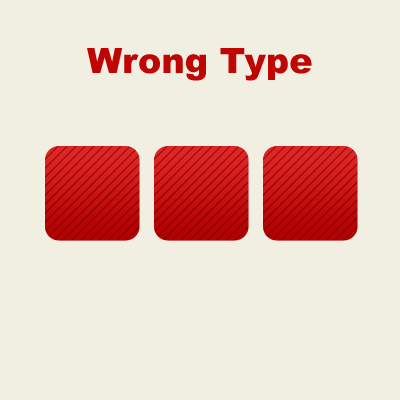
<style>
.page{position:relative;width:400px;height:400px;background:#f0efe1}
.page>*{position:absolute;margin:0}
.t1{font:35px "Arial-Black";color:#c00505}
</style>
<div class="page">
<p class="t1" style="left:87px;top:48px;width:225px;height:33px">Wrong Type</p>
</div>
